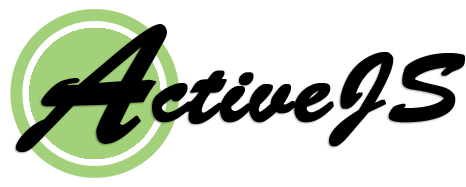
<style>
.page{position:relative;width:466px;height:187px;background:#ffffff}
.page>*{position:absolute;margin:0}
.t1{font:169.4px "BrushScriptStd";color:#000000;font-weight:bold}
.t2{font:97.7px "BrushScriptStd";color:#000000;font-weight:bold}
</style>
<div class="page">
<p class="t1" style="left:15px;top:24px;width:152px;height:129px">A</p>
<p class="t2" style="left:152px;top:52px;width:313px;height:95px">ctiveJS</p>
</div>
